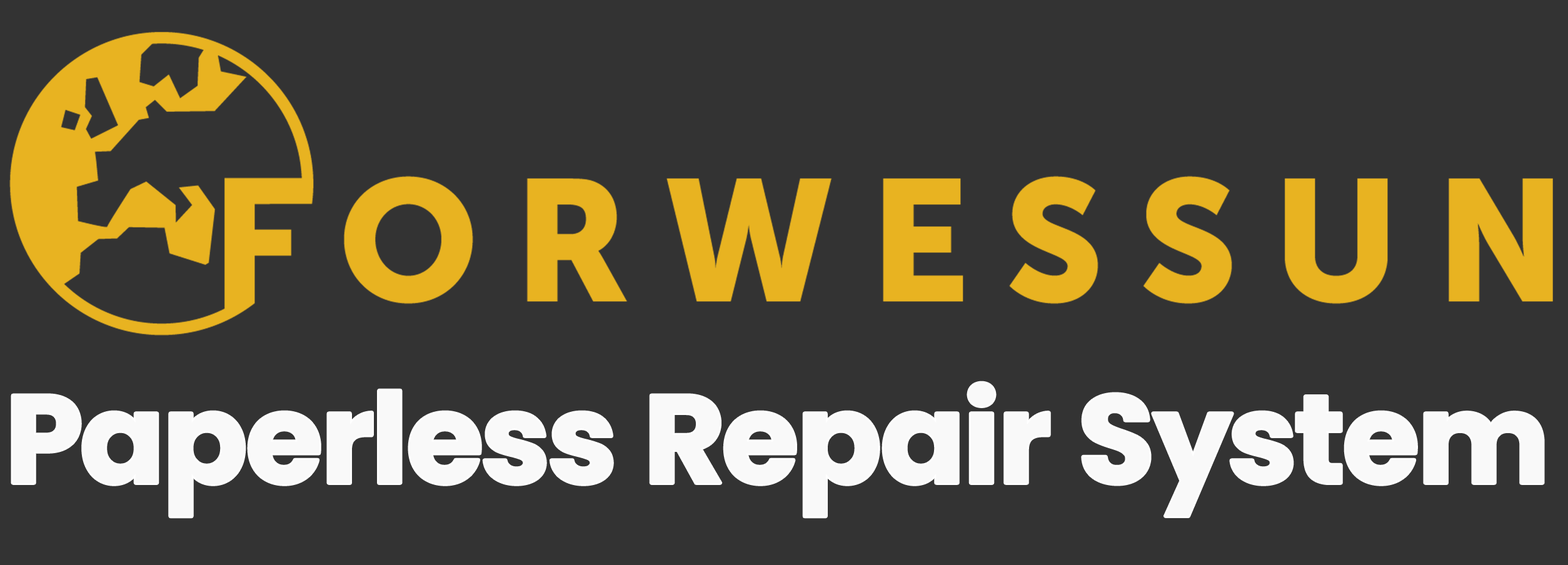
<style>
.page{position:relative;width:1568px;height:565px;background:#333333}
.page>*{position:absolute;margin:0}
.t1{font:125px "Poppins-Bold";color:#f9f9f9}
</style>
<div class="page">
<p class="t1" style="left:13px;top:383px;width:1530px;height:134px">Paperless Repair System</p>
</div>
